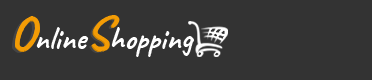
<style>
.page{position:relative;width:372px;height:80px;background:#333333}
.page>*{position:absolute;margin:0}
.t1{font:31.7px "Caveat-Bold";color:#ffffff}
.t2{font:48px "Caveat-Bold";color:#f39c05}
</style>
<div class="page">
<p class="t1" style="left:15px;top:16px;width:179px;height:41px"><span class="t2">O</span>nline<span class="t2">S</span>hopping</p>
<p class="t2" style="left:15px;top:16px;width:25px;height:35px">O</p>
<p class="t2" style="left:92px;top:15px;width:28px;height:36px">S</p>
</div>
